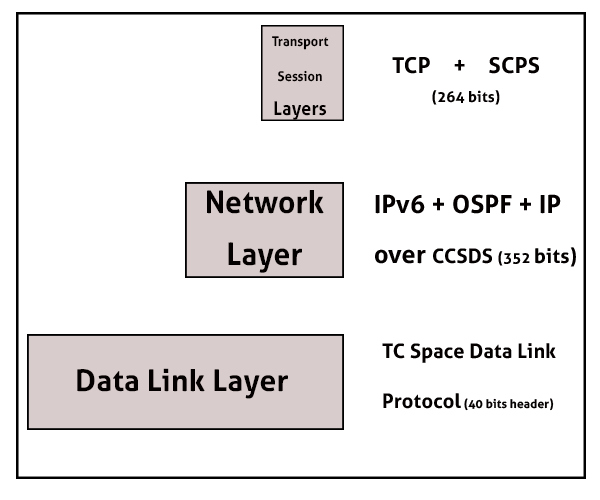
<style>
.page{position:relative;width:600px;height:500px;background:#ffffff}
.page>*{position:absolute;margin:0}
.t1{font:13.4px/34.6px "Aller-Bold";letter-spacing:0.01em;color:#040000;scale:0.94 1}
.t2{font:18.9px/34.6px "Aller-Bold";letter-spacing:0.01em;color:#040000;scale:0.94 1}
.t3{font:22px/29px "Aller-Bold";letter-spacing:0.01em;color:#040000}
.t4{font:15px/29px "Aller-Bold";letter-spacing:0.01em;color:#040000}
.t5{font:31.2px/51.5px "Aller-Bold";letter-spacing:0.01em;color:#040000;scale:0.96 1}
.t6{font:25px/50px "Aller-Bold";letter-spacing:0.01em;color:#040000}
.t7{font:20px/50px "Aller-Bold";letter-spacing:0.01em;color:#040000}
.t8{font:15px/50px "Aller-Bold";letter-spacing:0.01em;color:#040000}
.t9{font:12px/50px "Aller-Bold";letter-spacing:0.01em;color:#040000}
.t10{font:30px "Aller-Bold";letter-spacing:0.01em;color:#040000}
</style>
<div class="page">
<p class="t1" style="left:272px;top:36px;width:57px;height:84px;text-align:justify">Transport<br>Session <br><span class="t2">Layers</span></p>
<p class="t3" style="left:392px;top:57px;width:147px;height:48px;text-align:justify">TCP + SCPS <span class="t4">(264 bits)</span></p>
<p class="t5" style="left:207px;top:190px;width:117px;height:83px;text-align:justify">Network <br>Layer</p>
<p class="t6" style="left:375px;top:194px;width:201px;height:73px">IPv6 + OSPF + IP over <span class="t7">CCSDS </span><span class="t8">(352 </span><span class="t7">bits)</span></p>
<p class="t7" style="left:382px;top:343px;width:174px;height:68px">TC Space Data Link Protocol<span class="t9"> (40 bits header)</span></p>
<p class="t10" style="left:77px;top:368px;width:211px;height:31px">Data Link Layer</p>
</div>
